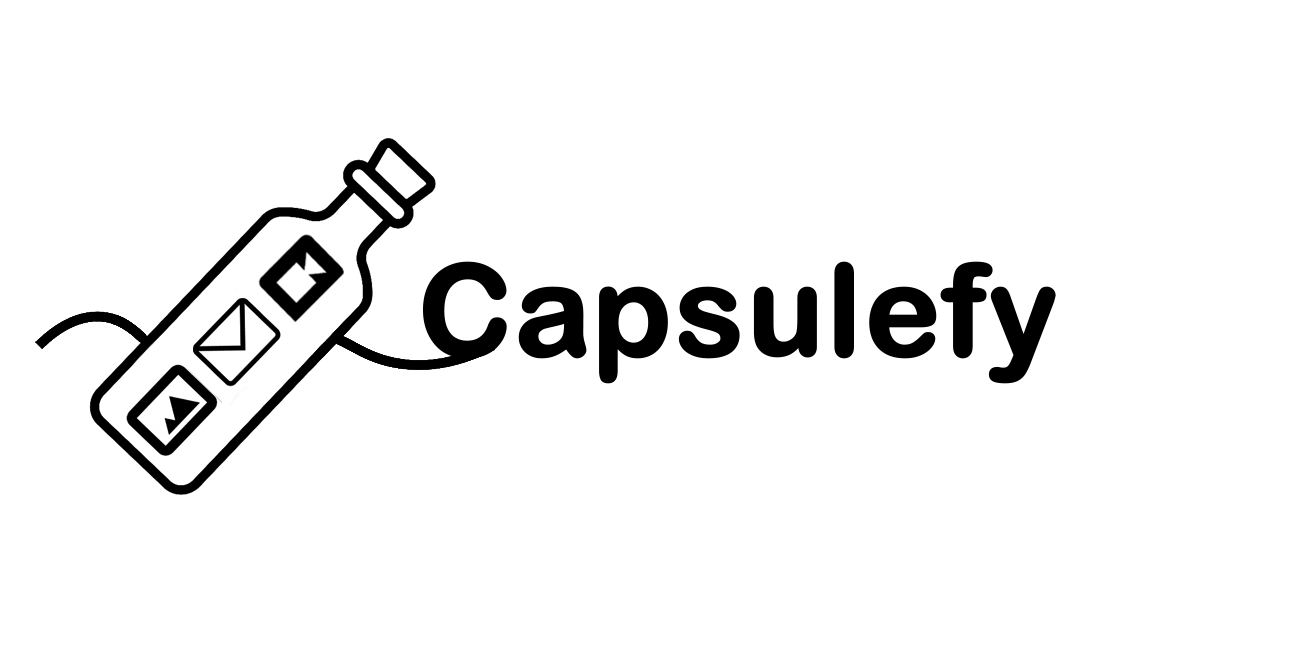
<style>
.page{position:relative;width:1308px;height:658px;background:#ffffff}
.page>*{position:absolute;margin:0}
.t1{font:126.8px "ArialRoundedMTBold";color:#000000;font-weight:bold}
</style>
<div class="page">
<p class="t1" style="left:423px;top:261px;width:633px;height:123px">Capsulefy</p>
</div>
